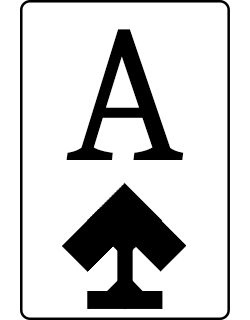
<style>
.page{position:relative;width:250px;height:320px;background:#ffffff}
.page>*{position:absolute;margin:0}
.t1{font:196.5px "Caladea-Regular";letter-spacing:-0.05em;color:#000000}
</style>
<div class="page">
<p class="t1" style="left:66px;top:29px;width:118px;height:131px">A</p>
</div>
